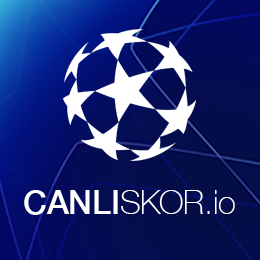
<style>
.page{position:relative;width:260px;height:260px}
.page>*{position:absolute;margin:0}
.t1{font:32.5px "HelveticaNeue-Thin";color:#ffffff}
.t2{font:32.5px "HelveticaNeue-Medium";color:#ffffff}
</style>
<div class="page">
<p class="t1" style="left:24px;top:190px;width:211px;height:25px"><span class="t2">CANLI</span>SKOR.io</p>
</div>
